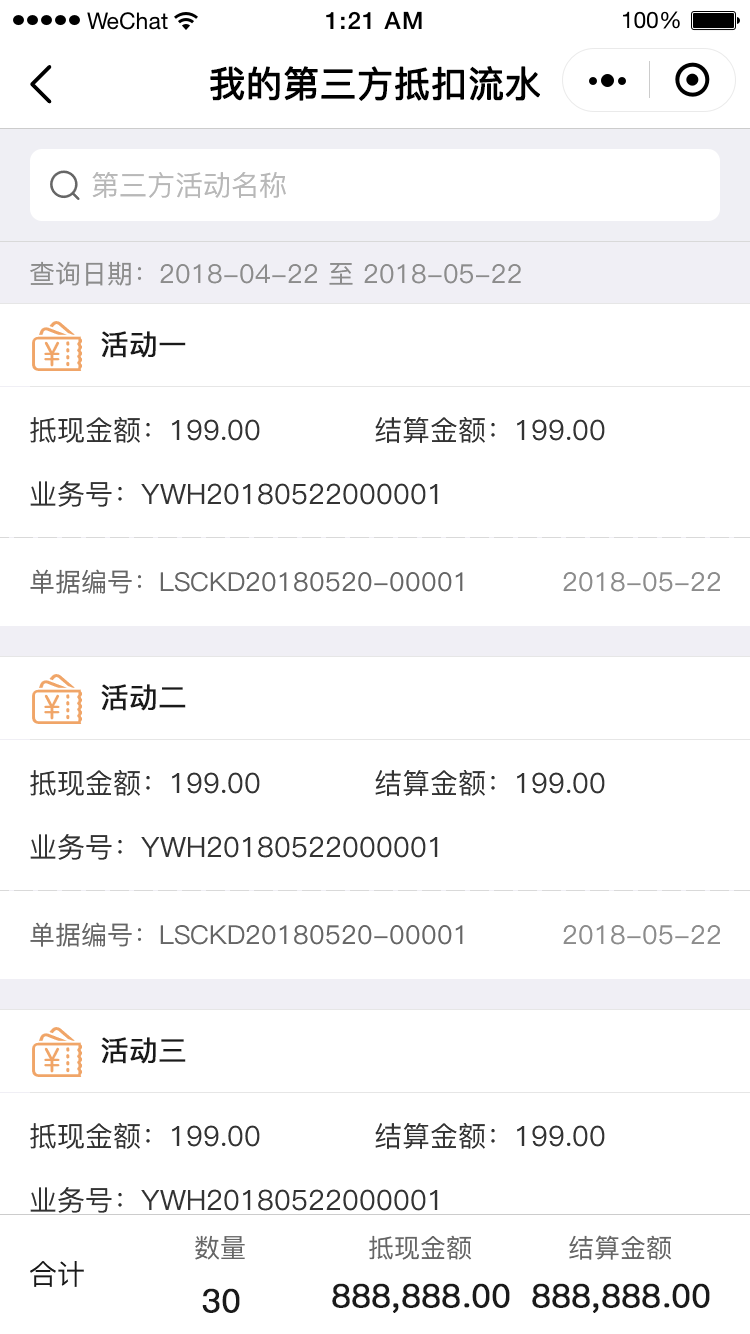
<style>
.page{position:relative;width:750px;height:1334px;background:#ffffff}
.page>*{position:absolute;margin:0}
.t1{font:36px "PingFang-SC-Medium";color:#000000;font-weight:bold}
.t2{font:28px "PingFang-SC-Medium";color:#b8b8b8}
.t3{font:26px "PingFang-SC-Medium";color:#8c8c8c}
.t4{font:28px "PingFang-SC-Medium";color:#1a1a1a;font-weight:bold}
.t5{font:28px "PingFang-SC-Medium";color:#333333}
.t6{font:26px "PingFang-SC-Medium";color:#666666}
.t7{font:28px "PingFang-SC-Medium";color:#1a1a1a}
.t8{font:32px "PingFang-SC-Medium";color:#1a1a1a;font-weight:bold}
</style>
<div class="page">
<p class="t1" style="left:210px;top:66px;width:330px;height:35px">我的第三方抵扣流水</p>
<p class="t2" style="left:92px;top:172px;width:194px;height:26px">第三方活动名称</p>
<p class="t3" style="left:30px;top:261px;width:491px;height:25px">查询日期：2018-04-22 至 2018-05-22</p>
<p class="t4" style="left:101px;top:331px;width:85px;height:27px">活动一</p>
<p class="t5" style="left:30px;top:417px;width:230px;height:26px">抵现金额：199.00</p>
<p class="t5" style="left:375px;top:417px;width:230px;height:26px">结算金额：199.00</p>
<p class="t5" style="left:30px;top:481px;width:408px;height:26px">业务号：YWH20180522000001</p>
<p class="t6" style="left:30px;top:569px;width:433px;height:25px">单据编号：LSCKD20180520-00001</p>
<p class="t3" style="left:563px;top:572px;width:157px;height:20px">2018-05-22</p>
<p class="t4" style="left:101px;top:684px;width:85px;height:27px">活动二</p>
<p class="t5" style="left:30px;top:770px;width:230px;height:26px">抵现金额：199.00</p>
<p class="t5" style="left:375px;top:770px;width:230px;height:26px">结算金额：199.00</p>
<p class="t5" style="left:30px;top:834px;width:408px;height:26px">业务号：YWH20180522000001</p>
<p class="t6" style="left:30px;top:922px;width:433px;height:25px">单据编号：LSCKD20180520-00001</p>
<p class="t3" style="left:563px;top:925px;width:157px;height:20px">2018-05-22</p>
<p class="t4" style="left:101px;top:1037px;width:85px;height:27px">活动三</p>
<p class="t5" style="left:30px;top:1123px;width:230px;height:26px">抵现金额：199.00</p>
<p class="t5" style="left:375px;top:1123px;width:230px;height:26px">结算金额：199.00</p>
<p class="t5" style="left:30px;top:1187px;width:408px;height:26px">业务号：YWH20180522000001</p>
<p class="t6" style="left:195px;top:1235px;width:50px;height:25px">数量</p>
<p class="t6" style="left:369px;top:1235px;width:103px;height:25px">抵现金额</p>
<p class="t6" style="left:569px;top:1235px;width:103px;height:25px">结算金额</p>
<p class="t7" style="left:30px;top:1261px;width:54px;height:26px">合计</p>
<p class="t8" style="left:202px;top:1288px;width:38px;height:25px">30</p>
<p class="t8" style="left:332px;top:1283px;width:178px;height:30px">888,888.00</p>
<p class="t8" style="left:532px;top:1283px;width:178px;height:30px">888,888.00</p>
</div>
